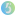
<style>
.page{position:relative;width:16px;height:16px;background:#ffffff}
.page>*{position:absolute;margin:0}
.t1{font:13.3px "FuturaStd-Heavy";letter-spacing:-0.01em;color:#dfdfdf}
</style>
<div class="page">
<p class="t1" style="left:4px;top:3px;width:8px;height:11px">5</p>
</div>
